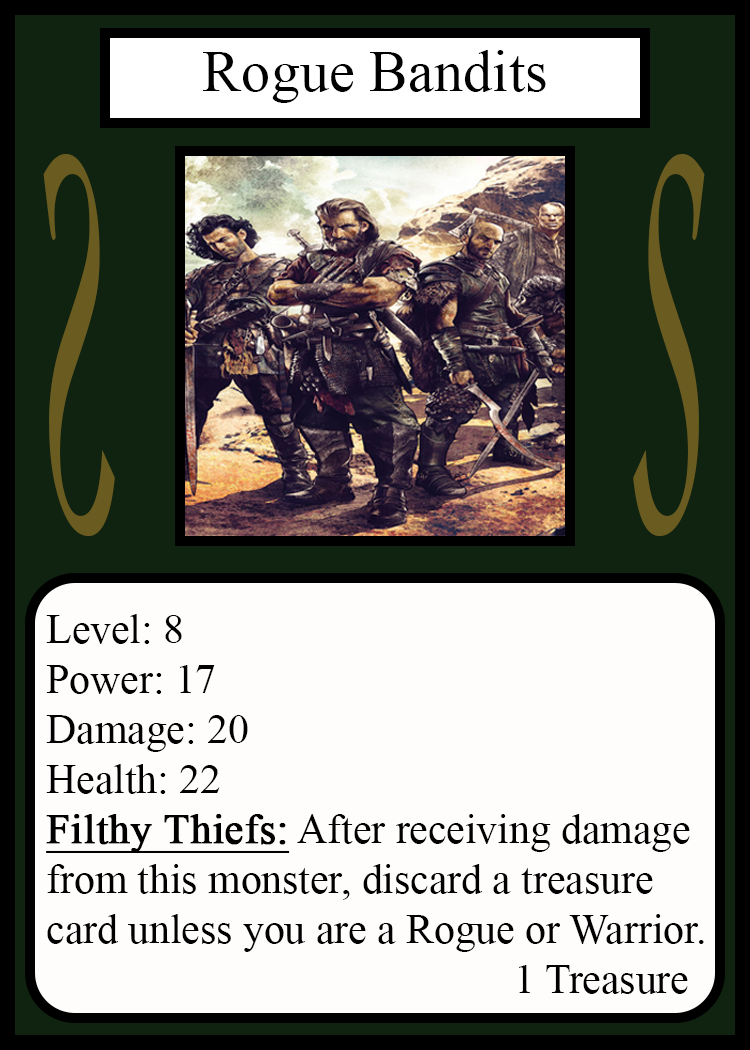
<style>
.page{position:relative;width:750px;height:1050px;background:#fffcfc}
.page>*{position:absolute;margin:0}
.t1{font:58.3px "TimesNewRomanPSMT";color:#010101}
.t2{font:548.5px "Apple-Chancery";color:#6a5c21;scale:0.27 1}
.t3{font:548.2px "Apple-Chancery";color:#6a5c21;scale:0.27 1}
.t4{font:41.7px "TimesNewRomanPSMT";color:#000000}
.t5{font:41.7px "TimesNewRomanPSMT";color:#000000;font-weight:bold;text-decoration:underline}
</style>
<div class="page">
<p class="t1" style="left:203px;top:50px;width:343px;height:53px">Rogue Bandits</p>
<p class="t2" style="left:43px;top:154px;width:72px;height:382px;rotate:180deg">S</p>
<p class="t3" style="left:633px;top:154px;width:72px;height:382px">S</p>
<p class="t4" style="left:46px;top:614px;width:658px;height:380px">Level: 8<br>Power: 17<br>Damage: 20<br>Health: 22<br><span class="t5">Filthy Thiefs:</span> After receiving damage<br>from this monster, discard a treasure<br>card unless you are a Rogue or Warrior.<br>             1 Treasure</p>
</div>
